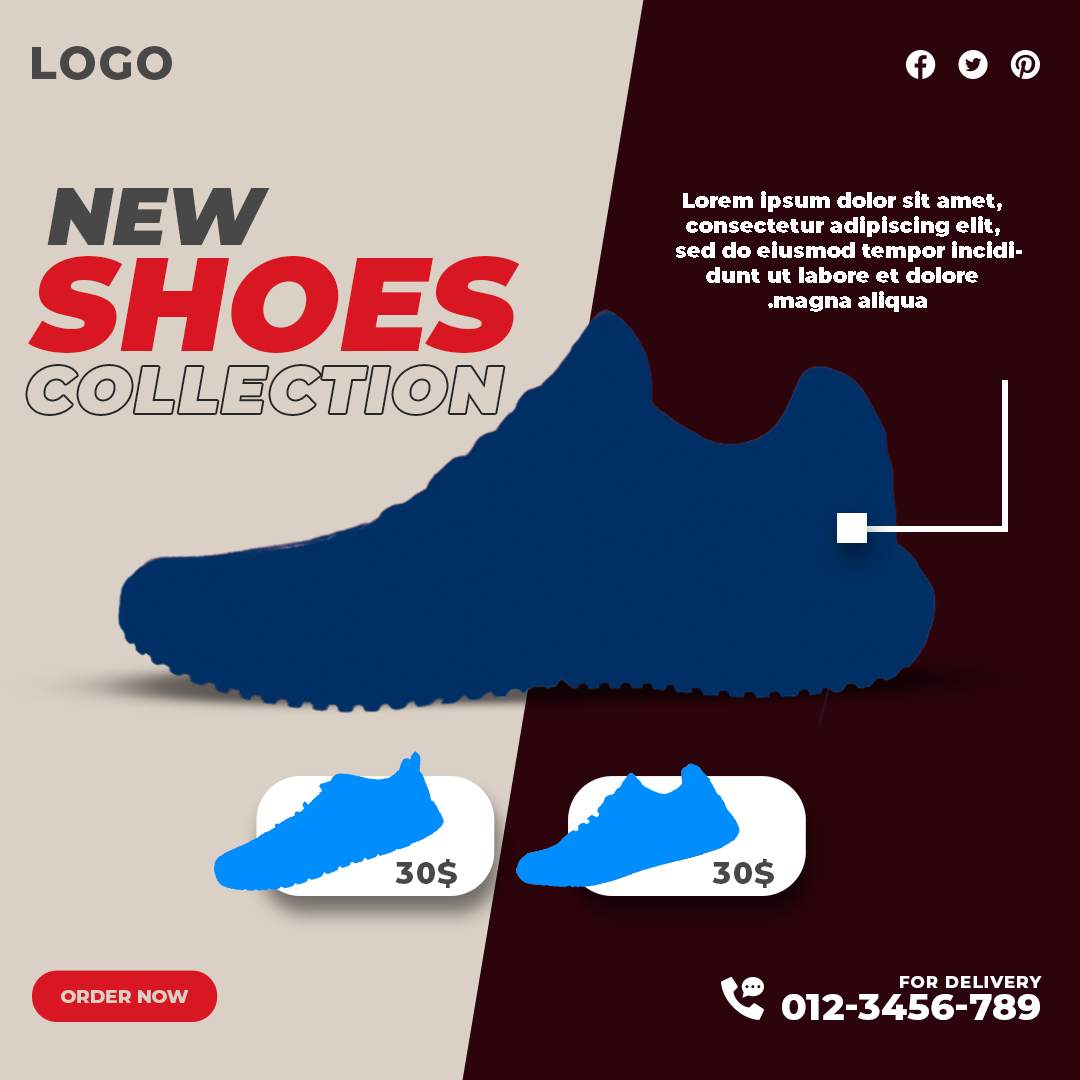
<style>
.page{position:relative;width:1080px;height:1080px;background:#dad0c5}
.page>*{position:absolute;margin:0}
.t1{font:45.7px "Montserrat-ExtraBold";letter-spacing:0.04em;color:#484848;text-transform:uppercase}
.t2{font:81.4px "Montserrat-Black";color:#484848;text-transform:uppercase;font-style:italic}
.t3{font:20.8px "Montserrat-Black";color:#ffffff}
.t4{font:133.4px "Montserrat-Black";color:#d91722;text-transform:uppercase;font-style:italic}
.t5{font:66px "Montserrat-Black";letter-spacing:0.04em;color:#dad0c5;text-transform:uppercase;font-style:italic}
.t6{font:30.4px "Montserrat-ExtraBold";letter-spacing:0.04em;color:#484849;text-transform:uppercase}
.t7{font:16.7px "Montserrat-ExtraBold";letter-spacing:0.05em;color:#fefefe;text-transform:uppercase}
.t8{font:18.5px "Montserrat-ExtraBold";color:#dad0c5;text-transform:uppercase}
.t9{font:36.6px "Montserrat-ExtraBold";color:#ffffff;text-transform:uppercase}
</style>
<div class="page">
<p class="t1" style="left:32px;top:46px;width:140px;height:34px">Logo</p>
<p class="t2" style="left:47px;top:188px;width:223px;height:57px">new</p>
<p class="t3" style="left:676px;top:191px;width:346px;height:121px;text-align:center">Lorem ipsum dolor sit amet, consectetur adipiscing elit, sed do eiusmod tempor incididunt ut labore et dolore magna aliqua.</p>
<p class="t4" style="left:28px;top:256px;width:492px;height:97px">shoes</p>
<p class="t5" style="left:27px;top:366px;width:477px;height:48px">collection</p>
<p class="t6" style="left:395px;top:859px;width:62px;height:29px">30$</p>
<p class="t6" style="left:712px;top:859px;width:62px;height:29px">30$</p>
<p class="t7" style="left:900px;top:976px;width:142px;height:12px">for Delivery</p>
<p class="t8" style="left:61px;top:990px;width:128px;height:13px">Order Now</p>
<p class="t9" style="left:782px;top:994px;width:258px;height:26px">012-3456-789</p>
</div>
